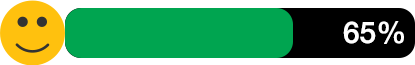
<style>
.page{position:relative;width:415px;height:65px;background:#00a550}
.page>*{position:absolute;margin:0}
.t1{font:30px "HelveticaNeueCyr-Medium";color:#ffffff}
</style>
<div class="page">
<p class="t1" style="left:343px;top:21px;width:61px;height:23px">65%</p>
</div>
